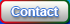
<style>
.page{position:relative;width:70px;height:24px}
.page>*{position:absolute;margin:0}
.t1{font:12.2px "Arial-BoldMT";color:#ffffff;scale:1.04 1}
</style>
<div class="page">
<p class="t1" style="left:11px;top:7px;width:47px;height:9px">Contact</p>
</div>
